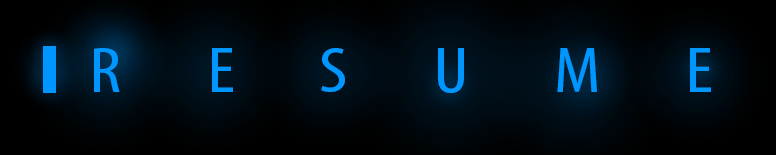
<style>
.page{position:relative;width:776px;height:155px}
.page>*{position:absolute;margin:0}
.t1{font:65.6px "MyriadPro-Cond";color:#0096ff;scale:1.18 1}
</style>
<div class="page">
<p class="t1" style="left:94px;top:48px;width:617px;height:45px">R       E       S       U       M       E</p>
</div>
